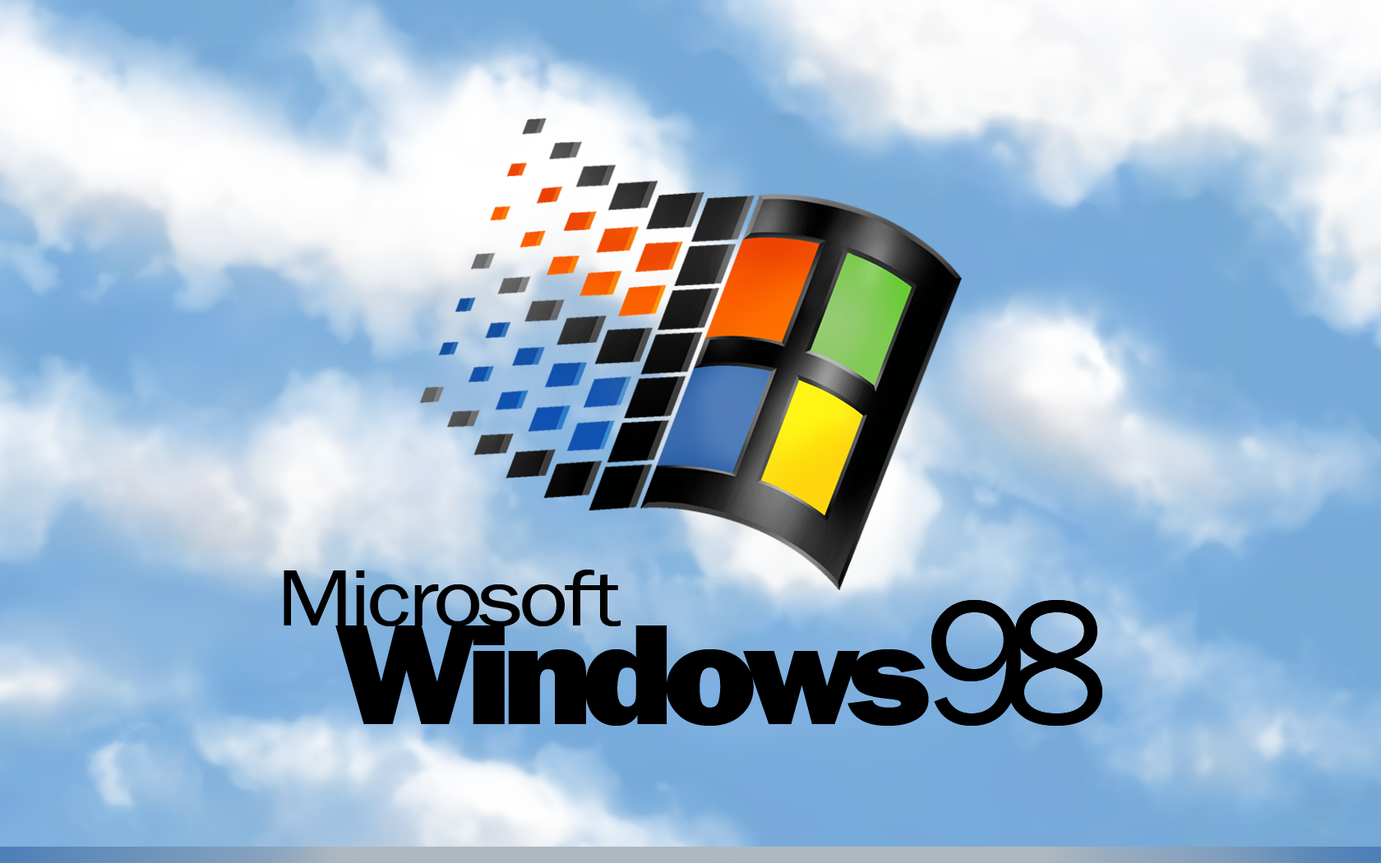
<style>
.page{position:relative;width:1381px;height:863px}
.page>*{position:absolute;margin:0}
.t1{font:82.2px "FranklinGothic-Book";letter-spacing:-0.04em;color:#000000;scale:1.16 1}
.t2{font:180.9px "FranklinGothic-Book";letter-spacing:-0.15em;color:#000000}
</style>
<div class="page">
<p class="t1" style="left:284px;top:570px;width:337px;height:57px">Microsoft</p>
<p class="t2" style="left:932px;top:600px;width:171px;height:126px">98</p>
</div>
